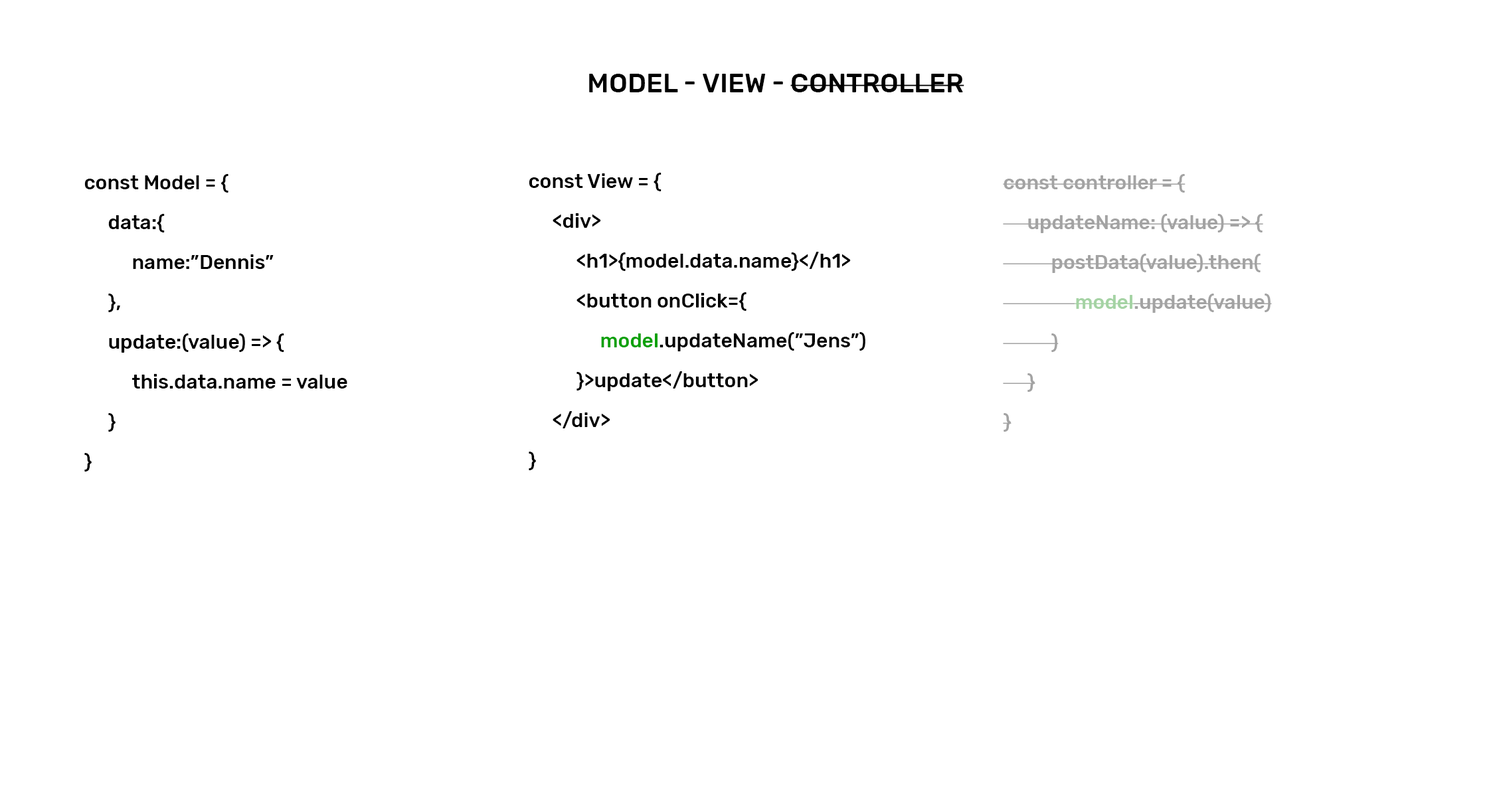
<style>
.page{position:relative;width:1497px;height:797px;background:#ffffff}
.page>*{position:absolute;margin:0}
.t1{font:26.6px "Rubik-Medium";color:#000000;text-transform:uppercase}
.t2{font:19.9px/39.8px "Rubik-Medium";color:#000000}
.t3{font:19.9px/39.8px "Rubik-Medium";color:#0ba108}
.t4{font:19.9px/39.8px "Rubik-Medium";color:#a3a3a3}
</style>
<div class="page">
<p class="t1" style="left:589px;top:74px;width:375px;height:18px">MODEL - VIEW - CONTROLLER</p>
<p class="t2" style="left:84px;top:174px;width:263px;height:297px">const Model = {<br> data:{<br>  name:”Dennis”<br> },<br> update:(value) =&gt; {<br>  this.data.name = value <br> }<br>}</p>
<p class="t2" style="left:529px;top:173px;width:336px;height:297px">const View = {<br> &lt;div&gt;<br>  &lt;h1&gt;{model.data.name}&lt;/h1&gt;<br>  &lt;button onClick={<br>   <span class="t3">model</span>.updateName(”Jens”)<br>  }&gt;update&lt;/button&gt;<br> &lt;/div&gt;<br>}</p>
<p class="t4" style="left:1003px;top:174px;width:269px;height:258px">const controller = {<br> updateName: (value) =&gt; {<br>  postData(value).then(<br>   model.update(value)<br>  )<br> }<br>}</p>
</div>
